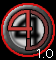
<style>
.page{position:relative;width:56px;height:60px;background:#000000}
.page>*{position:absolute;margin:0}
.t1{font:14px "Shruti";color:#ffffff}
</style>
<div class="page">
<p class="t1" style="left:37px;top:49px;width:16px;height:9px">1.0</p>
</div>
